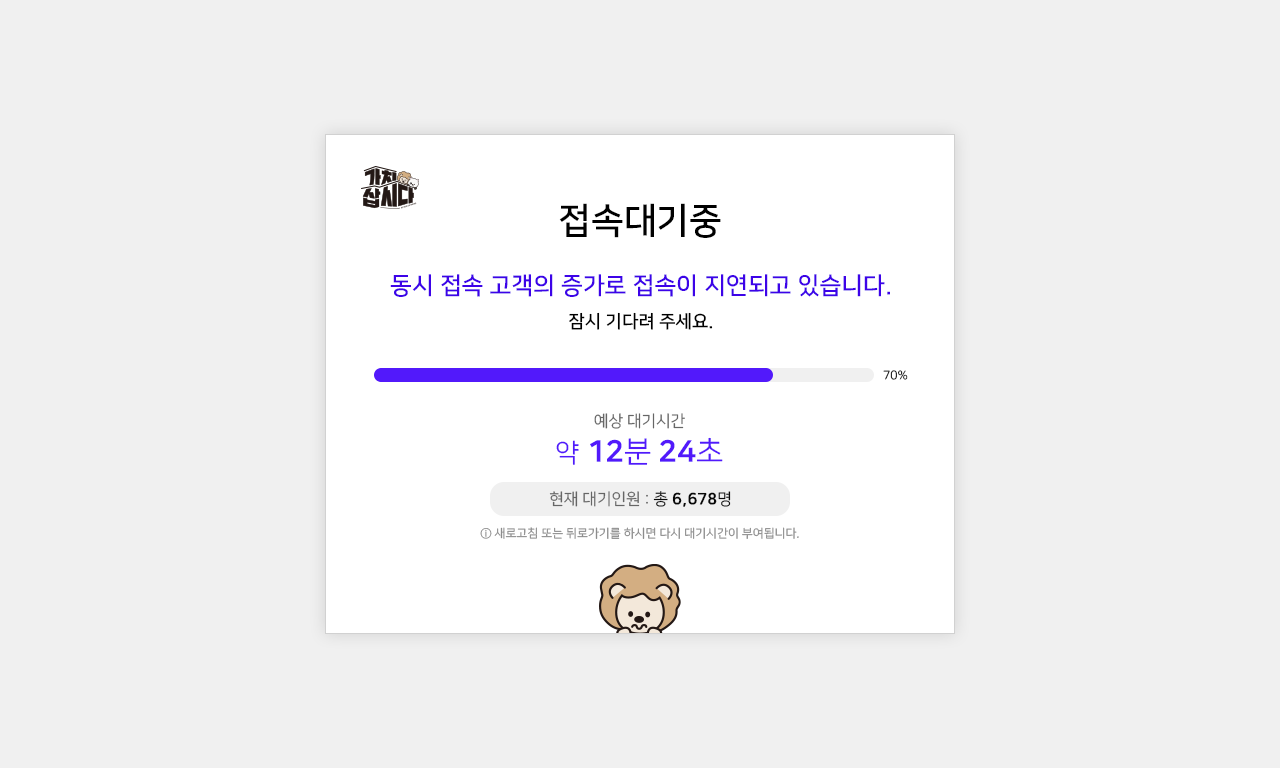
<style>
.page{position:relative;width:1280px;height:768px;background:#f0f0f0}
.page>*{position:absolute;margin:0}
.t1{font:36px "NanumSquareB";color:#000000}
.t2{font:24px "NanumSquareB";color:#3d03e8}
.t3{font:18px "NanumSquareB";color:#000000}
.t4{font:12px "NanumSquareR"}
.t5{font:16px "NanumSquareR";color:#666666}
.t6{font:30px "NanumSquareEB";color:#5219fb}
.t7{font:26px "NanumSquareR";color:#5219fb}
.t8{font:30px "NanumSquareR";color:#5219fb}
.t9{font:16px "NanumSquareR";color:#080808}
.t10{font:16px "NanumSquareEB";color:#080808}
.t11{font:12px "NanumSquareR";color:#8c8c8c}
</style>
<div class="page">
<p class="t1" style="left:559px;top:203px;width:162px;height:35px">접속대기중</p>
<p class="t2" style="left:390px;top:274px;width:500px;height:23px">동시 접속 고객의 증가로 접속이 지연되고 있습니다.</p>
<p class="t3" style="left:569px;top:312px;width:144px;height:18px">잠시 기다려 주세요.</p>
<p class="t4" style="left:883px;top:370px;width:25px;height:10px">70%</p>
<p class="t5" style="left:594px;top:413px;width:91px;height:16px">예상 대기시간</p>
<p class="t6" style="left:556px;top:437px;width:167px;height:28px"><span class="t7">약 </span>12<span class="t8">분 </span>24<span class="t8">초</span></p>
<p class="t5" style="left:549px;top:491px;width:182px;height:16px">현재 대기인원 : <span class="t9">총 </span><span class="t10">6,678</span><span class="t9">명</span></p>
<p class="t11" style="left:480px;top:527px;width:319px;height:12px">ⓘ 새로고침 또는 뒤로가기를 하시면 다시 대기시간이 부여됩니다.</p>
</div>
